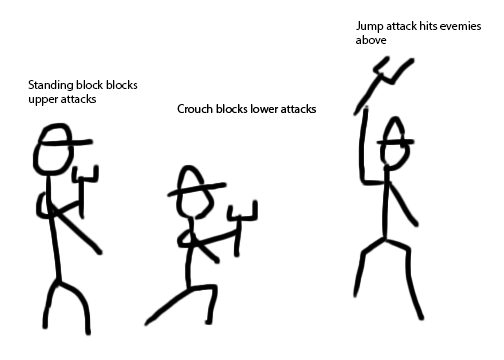
<style>
.page{position:relative;width:504px;height:360px;background:#ffffff}
.page>*{position:absolute;margin:0}
.t1{font:12px "MyriadPro-Regular";color:#000000}
</style>
<div class="page">
<p class="t1" style="left:356px;top:21px;width:125px;height:23px">Jump attack hits evemies<br>above</p>
<p class="t1" style="left:28px;top:80px;width:110px;height:26px">Standing block blocks<br>upper attacks</p>
</div>
